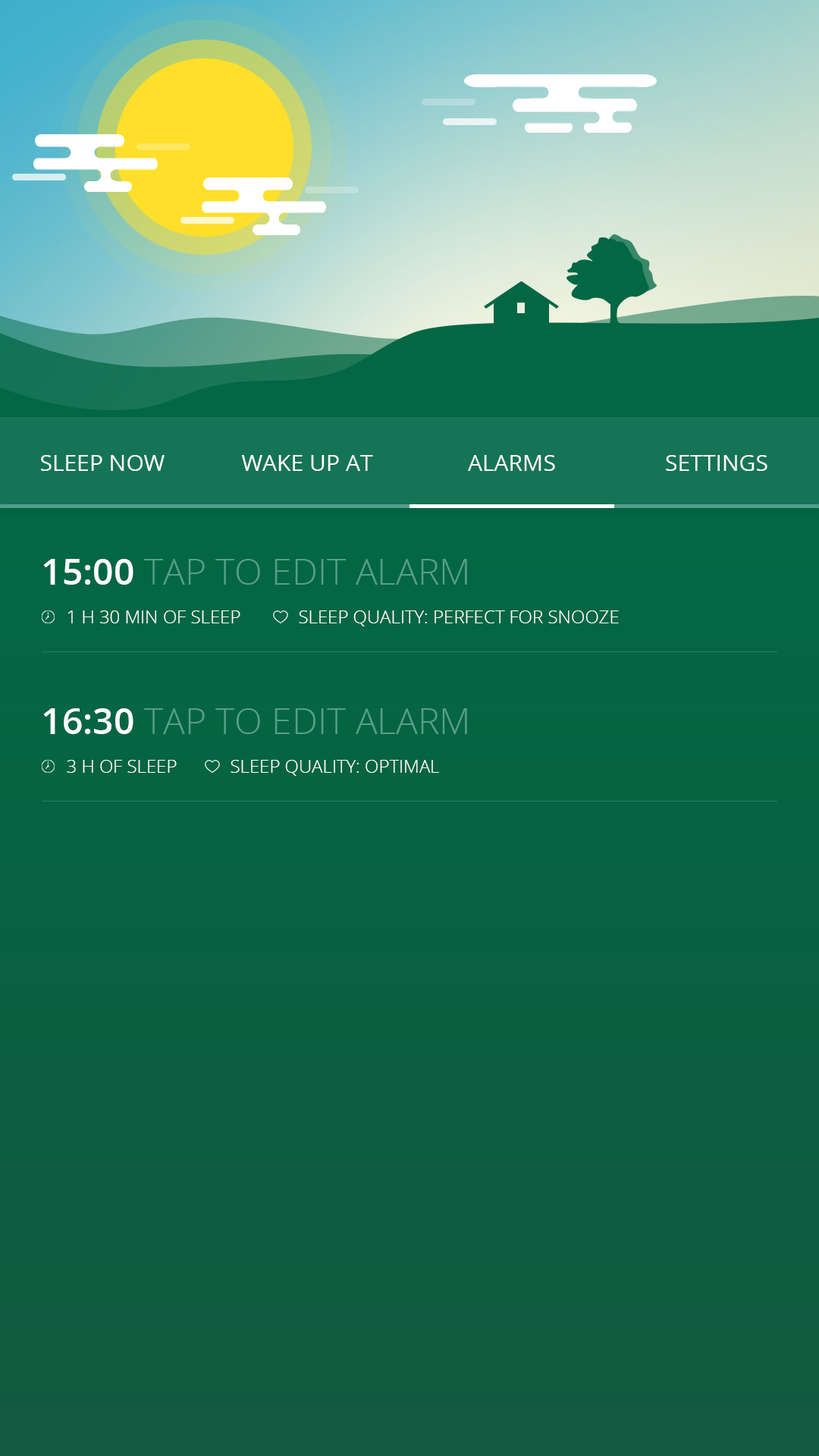
<style>
.page{position:relative;width:819px;height:1456px}
.page>*{position:absolute;margin:0}
.t1{font:22.7px "OpenSans-Regular";color:#ffffff}
.t2{font:36.4px "OpenSans-Light";color:#589f8b;text-transform:uppercase}
.t3{font:36.4px "OpenSans-SemiBold";color:#ffffff;text-transform:uppercase}
.t4{font:18.2px "OpenSans-Light";color:#ffffff;text-transform:uppercase}
</style>
<div class="page">
<p class="t1" style="left:41px;top:455px;width:124px;height:16px">SLEEP NOW</p>
<p class="t1" style="left:242px;top:455px;width:131px;height:16px">WAKE UP AT</p>
<p class="t1" style="left:468px;top:455px;width:87px;height:16px">ALARMS</p>
<p class="t1" style="left:666px;top:455px;width:101px;height:16px">SETTINGS</p>
<p class="t2" style="left:43px;top:559px;width:424px;height:26px"><span class="t3">15:00 </span>TAP TO EDIT ALARm</p>
<p class="t4" style="left:67px;top:610px;width:173px;height:13px">1 H 30 MIN of sleep</p>
<p class="t4" style="left:299px;top:610px;width:320px;height:16px">SLEEP QUALITY: perfect for snooze</p>
<p class="t2" style="left:43px;top:708px;width:424px;height:26px"><span class="t3">16:30 </span>TAP TO EDIT ALARm</p>
<p class="t4" style="left:67px;top:760px;width:110px;height:13px">3 h of sleep</p>
<p class="t4" style="left:231px;top:760px;width:208px;height:16px">SLEEP QUALITY: OPTIMAL</p>
</div>
